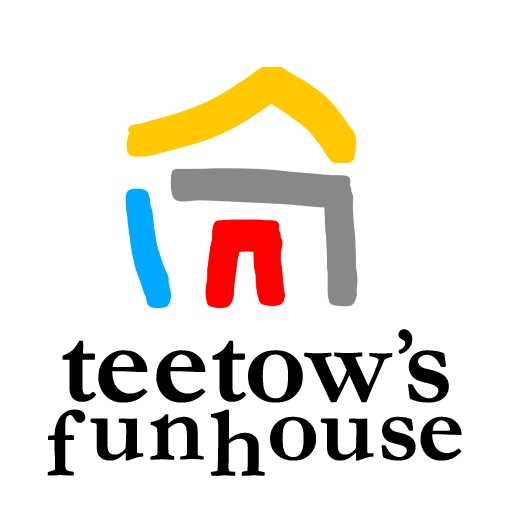
<style>
.page{position:relative;width:512px;height:512px;background:#ffffff}
.page>*{position:absolute;margin:0}
.t1{font:101.9px/74.2px "Garamond-Bold";color:#000000}
.t2{font:121.4px "Garamond-Bold";color:#000000}
.t3{font:78.4px "Garamond-Bold";color:#000000}
</style>
<div class="page">
<p class="t1" style="left:47px;top:329px;width:415px;height:147px;text-align:center"><span class="t2">teetow</span><span class="t3">’</span><span class="t2">s<br></span>funhouse</p>
</div>
